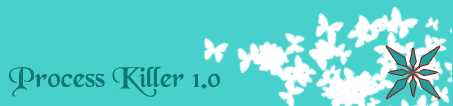
<style>
.page{position:relative;width:453px;height:106px;background:#48d1cc}
.page>*{position:absolute;margin:0}
.t1{font:30px "BlackChancery";color:#0e7874}
</style>
<div class="page">
<p class="t1" style="left:9px;top:66px;width:211px;height:31px">Process Killer 1.0</p>
</div>
